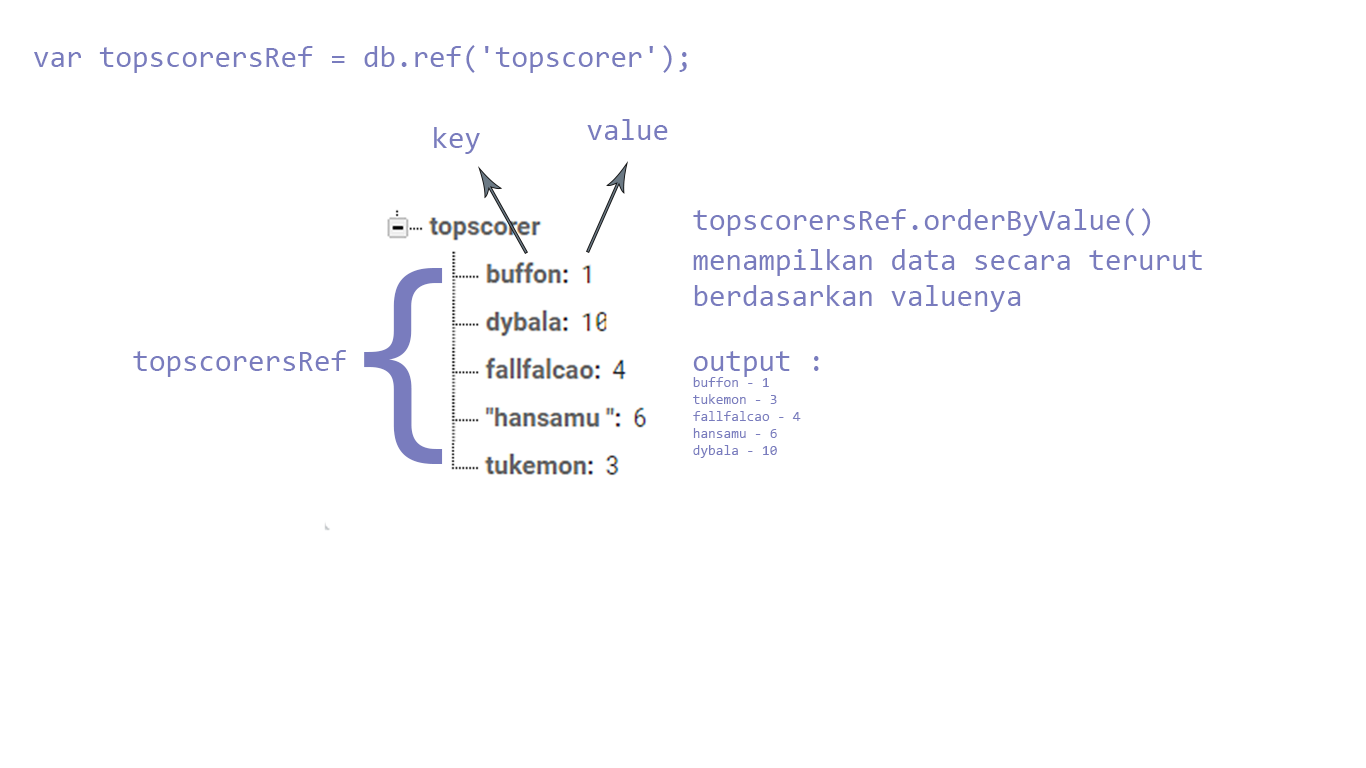
<style>
.page{position:relative;width:1366px;height:768px;background:#ffffff}
.page>*{position:absolute;margin:0}
.t1{font:30px "Consolas";color:#797cbe}
.t2{font:216.7px "Consolas";color:#797cbe}
.t3{font:14px "Consolas";color:#797cbe}
</style>
<div class="page">
<p class="t1" style="left:34px;top:45px;width:653px;height:28px">var topscorersRef = db.ref('topscorer');</p>
<p class="t1" style="left:587px;top:119px;width:81px;height:21px">value</p>
<p class="t1" style="left:434px;top:127px;width:46px;height:27px">key</p>
<p class="t1" style="left:693px;top:208px;width:458px;height:28px">topscorersRef.orderByValue()</p>
<p class="t1" style="left:693px;top:249px;width:509px;height:63px">menampilkan data secara terurut berdasarkan valuenya</p>
<p class="t2" style="left:364px;top:268px;width:79px;height:196px">{</p>
<p class="t1" style="left:133px;top:350px;width:213px;height:27px">topscorersRef</p>
<p class="t3" style="left:693px;top:351px;width:126px;height:107px"><span class="t1">output :<br></span>buffon - 1<br>tukemon - 3<br>fallfalcao - 4<br>hansamu - 6<br>dybala - 10</p>
</div>
